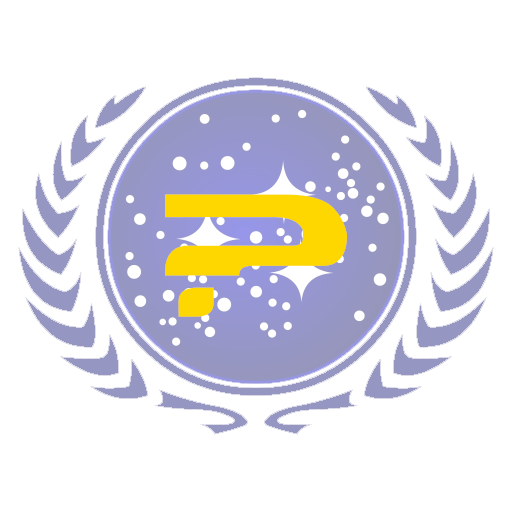
<style>
.page{position:relative;width:512px;height:512px;background:#ffffff}
.page>*{position:absolute;margin:0}
.t1{font:200px "Excelsior";color:#ffd700}
</style>
<div class="page">
<p class="t1" style="left:165px;top:194px;width:182px;height:123px">?</p>
</div>
